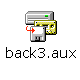
<style>
.page{position:relative;width:80px;height:80px;background:#ffffff}
.page>*{position:absolute;margin:0}
.t1{font:14px "MSReferenceSansSerif";color:#000000}
</style>
<div class="page">
<p class="t1" style="left:6px;top:47px;width:70px;height:11px">back3.aux</p>
</div>
